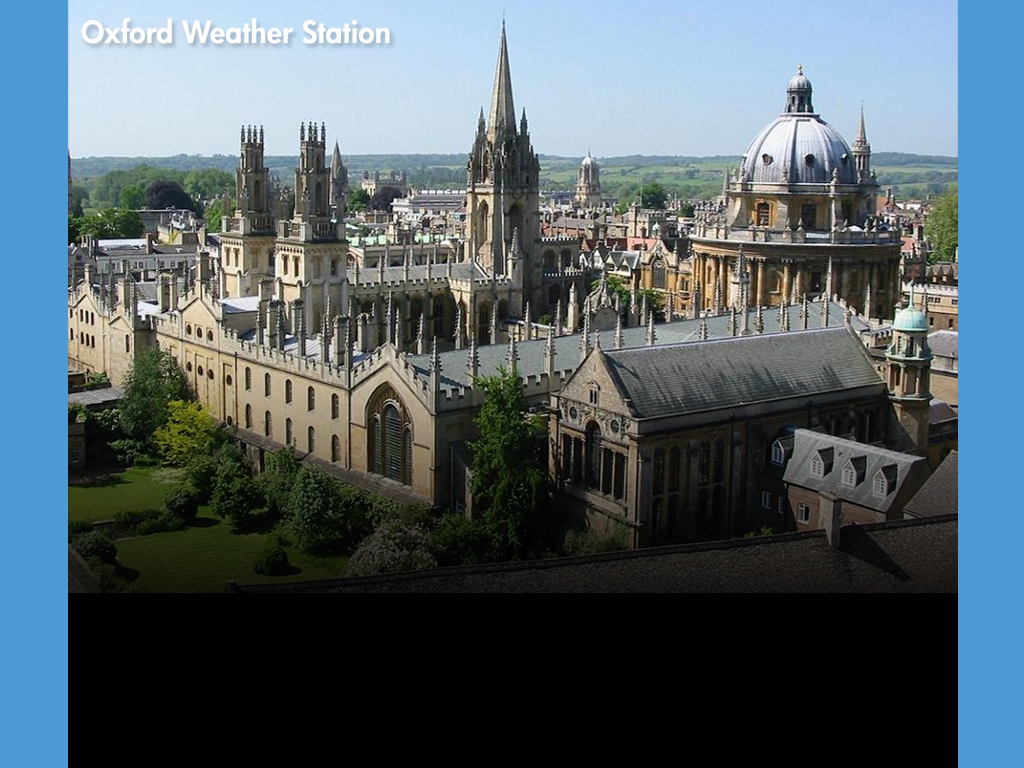
<style>
.page{position:relative;width:1024px;height:768px;background:#000000}
.page>*{position:absolute;margin:0}
.t1{font:30px "Futura-Heavy";color:#ffffff}
</style>
<div class="page">
<p class="t1" style="left:81px;top:17px;width:309px;height:27px">Oxford Weather Station</p>
</div>
